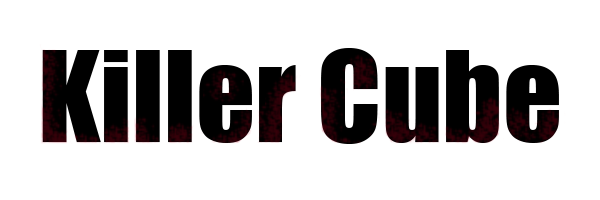
<style>
.page{position:relative;width:600px;height:200px;background:#ffffff}
.page>*{position:absolute;margin:0}
.t1{font:116.2px "Impact";color:#000000}
</style>
<div class="page">
<p class="t1" style="left:42px;top:48px;width:517px;height:96px">Killer Cube</p>
</div>
